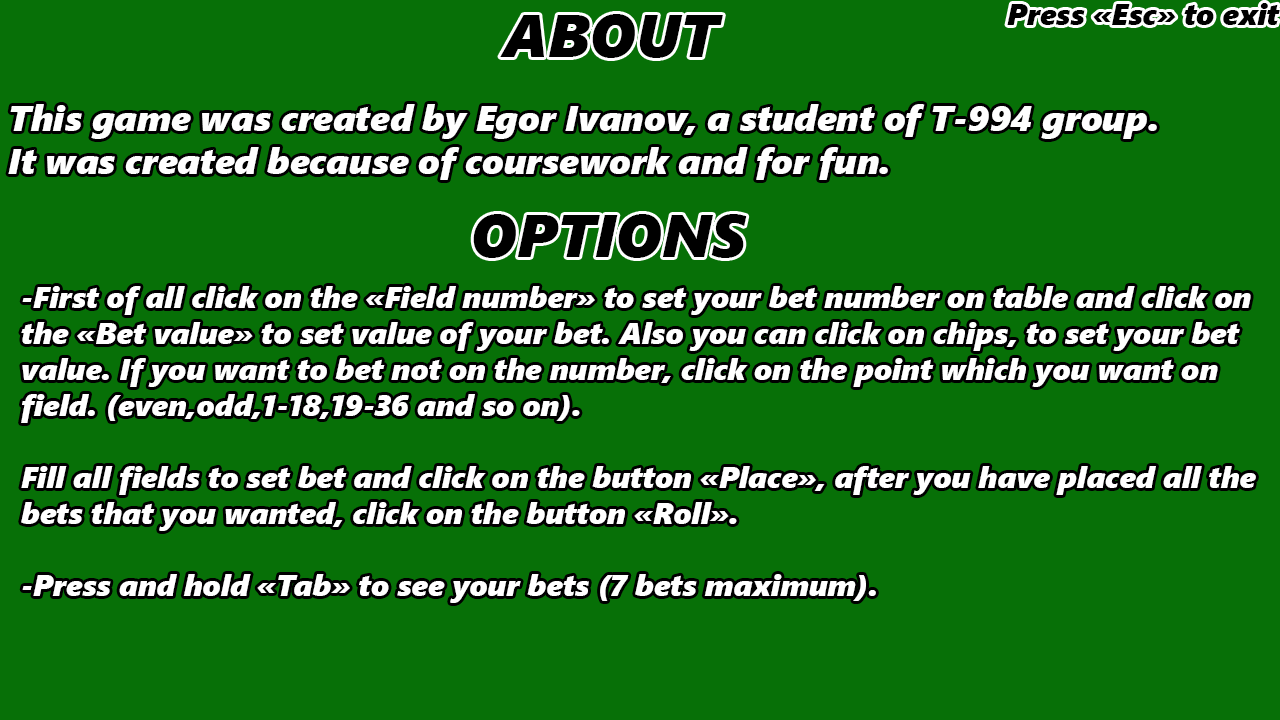
<style>
.page{position:relative;width:1280px;height:720px;background:#077007}
.page>*{position:absolute;margin:0}
.t1{font:30px "SegoeUIBlack-Italic";color:#000000}
.t2{font:60px "SegoeUIBlack-Italic";color:#000000}
.t3{font:36px "SegoeUIBlack-Italic";color:#fefefe}
.t4{font:30px "SegoeUIBlack-Italic";color:#ffffff}
.t5{font:36px "SegoeUIBlack-Italic";color:#ffffff}
</style>
<div class="page">
<p class="t1" style="left:1007px;top:3px;width:273px;height:22px">Press «Esc» to exit</p>
<p class="t2" style="left:500px;top:14px;width:223px;height:44px">ABOUT</p>
<p class="t3" style="left:8px;top:104px;width:1149px;height:76px">This game was created by Egor Ivanov, a student of T-994 group.<br>It was created because of coursework and for fun.</p>
<p class="t2" style="left:473px;top:214px;width:274px;height:44px">OPTIONS</p>
<p class="t4" style="left:21px;top:286px;width:1235px;height:317px">-First of all click on the «Field number» to set your bet number on table and click on <br>the «Bet value» to set value of your bet. Also you can click on chips, to set your bet <br>value. If you want to bet not on the number, click on the point which you want on <br>field. (even,odd,1-18,19-36 and so on).<br><br>Fill all fields to set bet and click on the button «Place», after you have placed all the <br>bets that you wanted, click on the button «Roll». <br><br>-Press and hold «Tab» to see your bets (7 bets maximum).<br><br><span class="t5"></span></p>
</div>
